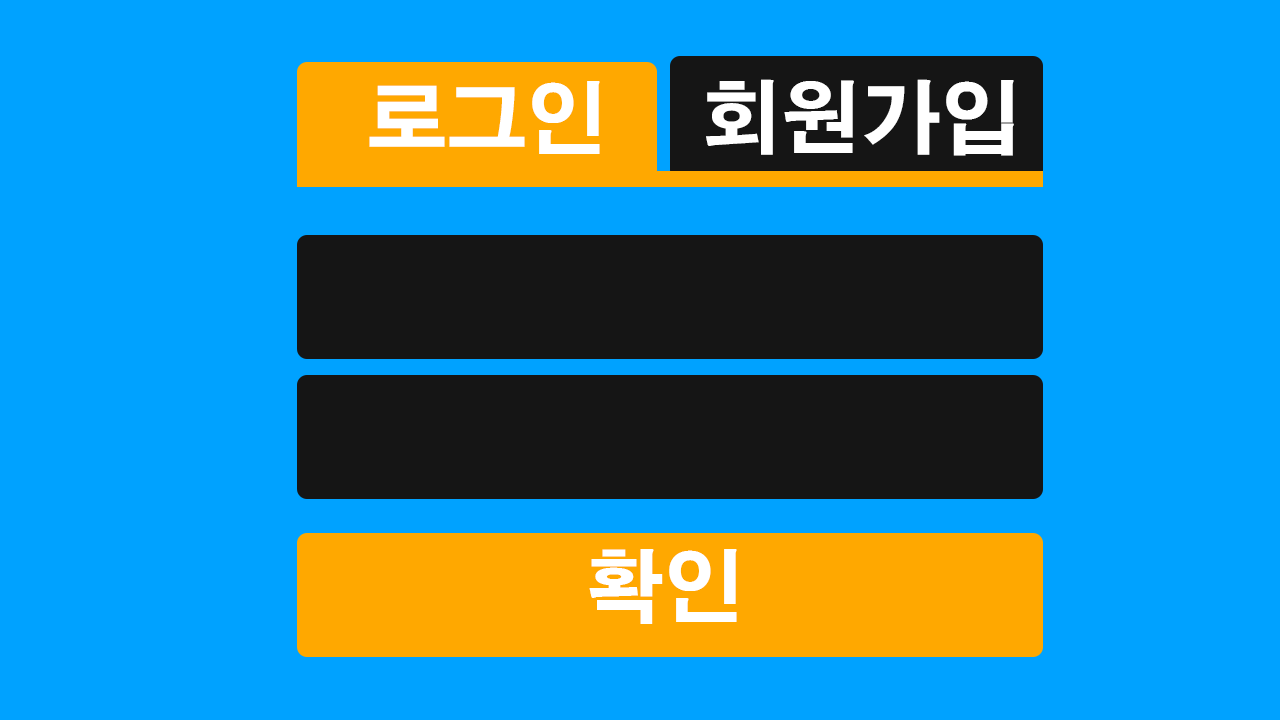
<style>
.page{position:relative;width:1280px;height:720px;background:#00a2ff}
.page>*{position:absolute;margin:0}
.t1{font:80px "H2gtrE";color:#ffffff}
</style>
<div class="page">
<p class="t1" style="left:369px;top:81px;width:231px;height:73px">로그인</p>
<p class="t1" style="left:706px;top:79px;width:308px;height:77px">회원가입</p>
<p class="t1" style="left:589px;top:549px;width:148px;height:75px">확인</p>
</div>
